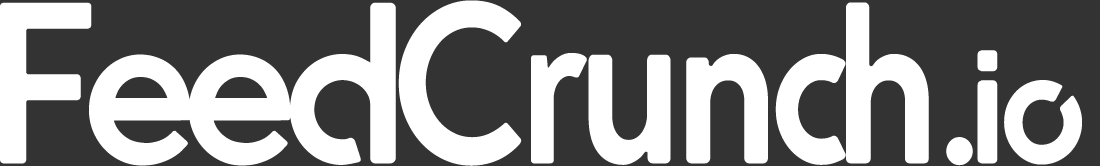
<style>
.page{position:relative;width:1100px;height:166px;background:#333333}
.page>*{position:absolute;margin:0}
.t1{font:229.2px "Enso";letter-spacing:-0.06em;color:#ffffff;scale:0.95 1}
.t2{font:229.2px "Enso";letter-spacing:-0.06em;color:#ffffff;scale:0.87 1}
.t3{font:175px "Enso";letter-spacing:-0.06em;color:#ffffff;scale:0.95 1}
</style>
<div class="page">
<p class="t1" style="left:0px;top:2px;width:396px;height:164px">Feed</p>
<p class="t2" style="left:398px;top:0px;width:531px;height:166px">Crunch</p>
<p class="t3" style="left:946px;top:50px;width:136px;height:116px">.io</p>
</div>
